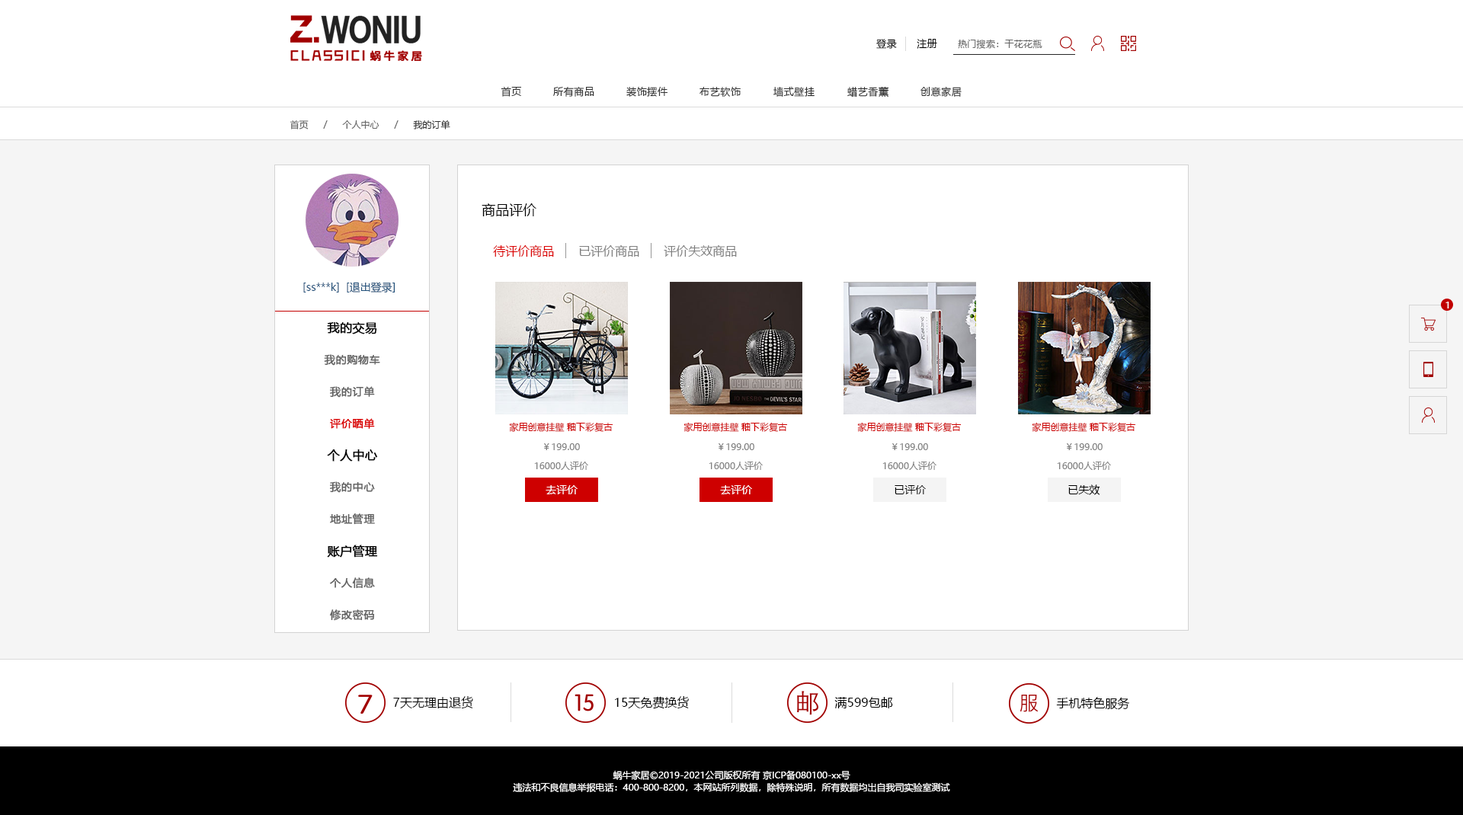
<style>
.page{position:relative;width:1463px;height:815px;background:#ffffff}
.page>*{position:absolute;margin:0}
.t1{font:9.9px "MicrosoftYaHei";letter-spacing:0.05em;color:#000000}
.t2{font:9.1px "MicrosoftYaHei";letter-spacing:0.025em;color:#686868}
.t3{font:9.9px "MicrosoftYaHei";letter-spacing:0.05em;color:#333333}
.t4{font:9.1px "MicrosoftYaHei";color:#666666}
.t5{font:9.1px "MicrosoftYaHei";color:#333333}
.t6{font:13.7px "MicrosoftYaHei";color:#000000}
.t7{font:12.2px "MicrosoftYaHei";color:#db0000}
.t8{font:12.2px "MicrosoftYaHei";color:#808080}
.t9{font:10.7px "MicrosoftYaHei";color:#23527c}
.t10{font:9.1px "MicrosoftYaHei";letter-spacing:0.025em;color:#ffffff}
.t11{font:12.2px "MicrosoftYaHei";color:#000000;font-weight:bold}
.t12{font:10.7px "MicrosoftYaHei";letter-spacing:0.025em;color:#626262;font-weight:bold}
.t13{font:10.7px "MicrosoftYaHei";letter-spacing:0.025em;color:#db0000;font-weight:bold}
.t14{font:9.1px "MicrosoftYaHei";color:#ce0000}
.t15{font:9.1px "MicrosoftYaHei";color:#808080}
.t16{font:10.7px "MicrosoftYaHei";color:#ffffff}
.t17{font:10.7px "MicrosoftYaHei";color:#000000}
.t18{font:12.2px "MicrosoftYaHei";color:#000000}
.t19{font:9.1px/12.2px "MicrosoftYaHei";color:#ffffff}
</style>
<div class="page">
<p class="t1" style="left:876px;top:39px;width:21px;height:10px">登录</p>
<p class="t1" style="left:917px;top:39px;width:20px;height:10px">注册</p>
<p class="t2" style="left:958px;top:39px;width:84px;height:10px">热门搜索：干花花瓶</p>
<p class="t3" style="left:501px;top:87px;width:20px;height:10px">首页</p>
<p class="t3" style="left:553px;top:87px;width:41px;height:10px">所有商品</p>
<p class="t3" style="left:626px;top:87px;width:41px;height:10px">装饰摆件</p>
<p class="t3" style="left:699px;top:87px;width:42px;height:10px">布艺软饰</p>
<p class="t3" style="left:773px;top:87px;width:41px;height:10px">墙式壁挂</p>
<p class="t3" style="left:847px;top:86px;width:42px;height:12px">蜡艺香薰</p>
<p class="t3" style="left:920px;top:87px;width:41px;height:10px">创意家居</p>
<p class="t4" style="left:290px;top:120px;width:19px;height:10px">首页</p>
<p class="t4" style="left:323px;top:120px;width:5px;height:9px">/</p>
<p class="t4" style="left:342px;top:120px;width:37px;height:9px">个人中心</p>
<p class="t4" style="left:394px;top:120px;width:4px;height:9px">/</p>
<p class="t5" style="left:413px;top:120px;width:37px;height:10px">我的订单</p>
<p class="t6" style="left:481px;top:203px;width:55px;height:13px">商品评价</p>
<p class="t7" style="left:493px;top:245px;width:61px;height:13px">待评价商品</p>
<p class="t8" style="left:579px;top:245px;width:60px;height:13px">已评价商品</p>
<p class="t8" style="left:664px;top:245px;width:73px;height:13px">评价失效商品</p>
<p class="t9" style="left:347px;top:282px;width:48px;height:11px">[退出登录]</p>
<p class="t9" style="left:303px;top:283px;width:36px;height:10px">[ss***k]</p>
<p class="t10" style="left:1445px;top:302px;width:4px;height:7px">1</p>
<p class="t11" style="left:327px;top:322px;width:50px;height:12px">我的交易</p>
<p class="t12" style="left:324px;top:354px;width:56px;height:12px">我的购物车</p>
<p class="t12" style="left:330px;top:386px;width:45px;height:12px">我的订单</p>
<p class="t13" style="left:330px;top:418px;width:45px;height:11px">评价晒单</p>
<p class="t14" style="left:509px;top:422px;width:104px;height:10px">家用创意挂壁 釉下彩复古</p>
<p class="t14" style="left:683px;top:422px;width:104px;height:10px">家用创意挂壁 釉下彩复古</p>
<p class="t14" style="left:857px;top:422px;width:104px;height:10px">家用创意挂壁 釉下彩复古</p>
<p class="t14" style="left:1032px;top:422px;width:103px;height:10px">家用创意挂壁 釉下彩复古</p>
<p class="t11" style="left:327px;top:449px;width:51px;height:13px">个人中心</p>
<p class="t15" style="left:544px;top:443px;width:36px;height:7px">￥199.00</p>
<p class="t15" style="left:718px;top:443px;width:36px;height:7px">￥199.00</p>
<p class="t15" style="left:892px;top:443px;width:36px;height:7px">￥199.00</p>
<p class="t15" style="left:1067px;top:443px;width:35px;height:7px">￥199.00</p>
<p class="t15" style="left:534px;top:462px;width:54px;height:8px">16000人评价</p>
<p class="t15" style="left:709px;top:462px;width:54px;height:8px">16000人评价</p>
<p class="t15" style="left:882px;top:462px;width:54px;height:8px">16000人评价</p>
<p class="t15" style="left:1057px;top:462px;width:54px;height:8px">16000人评价</p>
<p class="t12" style="left:330px;top:481px;width:45px;height:12px">我的中心</p>
<p class="t16" style="left:545px;top:485px;width:32px;height:9px">去评价</p>
<p class="t16" style="left:720px;top:485px;width:32px;height:9px">去评价</p>
<p class="t17" style="left:894px;top:485px;width:32px;height:9px">已评价</p>
<p class="t17" style="left:1068px;top:485px;width:32px;height:10px">已失效</p>
<p class="t12" style="left:330px;top:513px;width:45px;height:12px">地址管理</p>
<p class="t11" style="left:327px;top:545px;width:51px;height:13px">账户管理</p>
<p class="t12" style="left:330px;top:577px;width:45px;height:12px">个人信息</p>
<p class="t12" style="left:330px;top:609px;width:45px;height:12px">修改密码</p>
<p class="t18" style="left:393px;top:696px;width:80px;height:13px">7天无理由退货</p>
<p class="t18" style="left:615px;top:696px;width:74px;height:13px">15天免费换货</p>
<p class="t18" style="left:834px;top:697px;width:59px;height:12px">满599包邮</p>
<p class="t18" style="left:1056px;top:697px;width:74px;height:13px">手机特色服务</p>
<p class="t19" style="left:513px;top:770px;width:437px;height:22px;text-align:center">蜗牛家居©2019-2021公司版权所有 京ICP备080100-xx号<br>违法和不良信息举报电话：400-800-8200，本网站所列数据，除特殊说明，所有数据均出自我司实验室测试</p>
</div>
